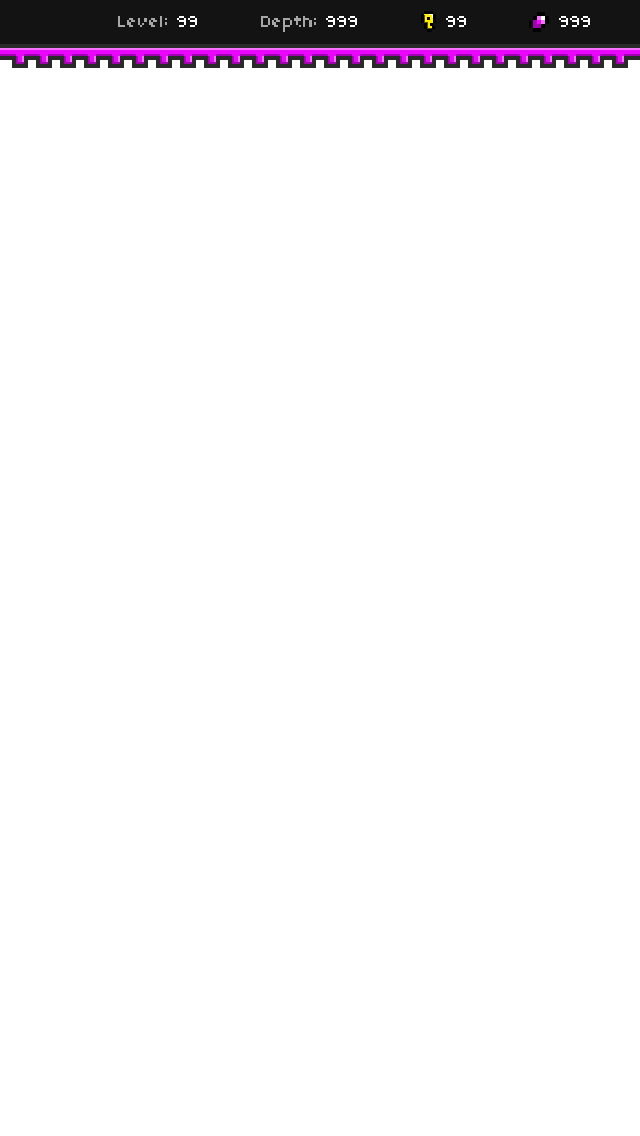
<style>
.page{position:relative;width:640px;height:1136px;background:#ffffff}
.page>*{position:absolute;margin:0}
.t1{font:18px "04b03";color:#a7a7a7}
.t2{font:18px "04b03";color:#ffffff}
</style>
<div class="page">
<p class="t1" style="left:118px;top:16px;width:49px;height:11px">Level:</p>
<p class="t2" style="left:177px;top:16px;width:20px;height:11px">99</p>
<p class="t1" style="left:261px;top:16px;width:55px;height:16px">Depth:</p>
<p class="t2" style="left:326px;top:16px;width:31px;height:11px">999</p>
<p class="t2" style="left:446px;top:16px;width:20px;height:11px">99</p>
<p class="t2" style="left:559px;top:16px;width:31px;height:11px">999</p>
</div>
